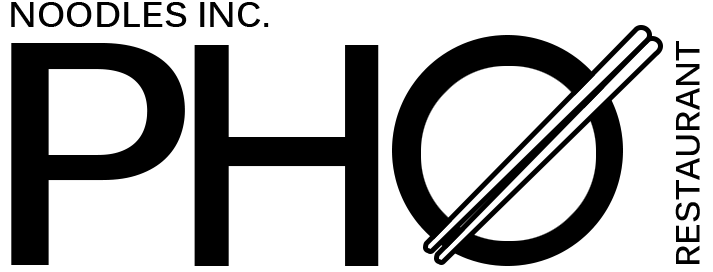
<style>
.page{position:relative;width:713px;height:272px;background:#ffffff}
.page>*{position:absolute;margin:0}
.t1{font:35px "Kalinga-Bold";color:#000000}
.t2{font:33px "Kalinga-Bold";color:#000000}
.t3{font:311.5px "Kalinga-Bold";color:#000000;scale:1.06 1}
.t4{font:310.8px "Kalinga-Bold";color:#000000;scale:0.97 1}
</style>
<div class="page">
<p class="t1" style="left:11px;top:2px;width:258px;height:25px">NOODLES INC.</p>
<p class="t2" style="left:675px;top:41px;width:25px;height:223px;rotate:-90deg">RESTAURANT</p>
<p class="t3" style="left:11px;top:43px;width:174px;height:222px">P</p>
<p class="t4" style="left:194px;top:45px;width:185px;height:221px">H</p>
</div>
